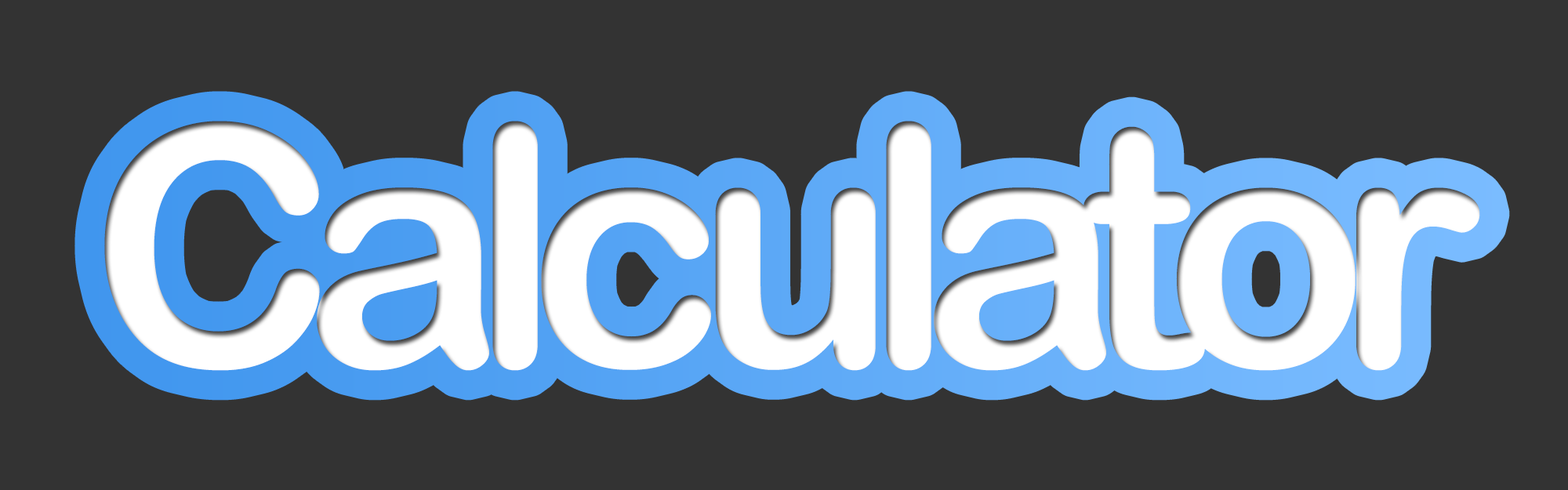
<style>
.page{position:relative;width:1568px;height:490px;background:#333333}
.page>*{position:absolute;margin:0}
.t1{font:336.5px "ArialRoundedMTBold";letter-spacing:-0.1em;color:#ffffff}
</style>
<div class="page">
<p class="t1" style="left:104px;top:121px;width:1376px;height:250px">Calculator</p>
</div>
